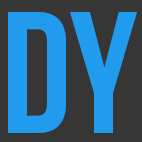
<style>
.page{position:relative;width:142px;height:142px;background:#363636}
.page>*{position:absolute;margin:0}
.t1{font:172.8px "BebasNeue";color:#209cee}
</style>
<div class="page">
<p class="t1" style="left:8px;top:12px;width:129px;height:121px">Dy</p>
</div>
